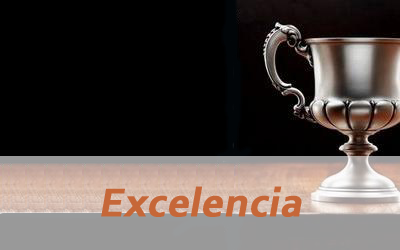
<style>
.page{position:relative;width:400px;height:250px;background:#000000}
.page>*{position:absolute;margin:0}
.t1{font:41.7px "Corbel-Bold";letter-spacing:0.005em;color:#c66738;font-weight:bold;font-style:italic}
</style>
<div class="page">
<p class="t1" style="left:101px;top:186px;width:201px;height:31px">Excelencia</p>
</div>
